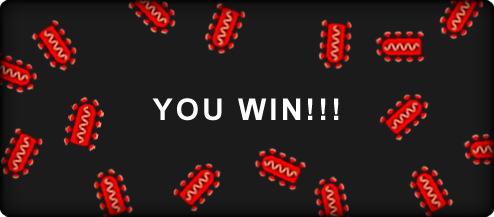
<style>
.page{position:relative;width:494px;height:217px;background:#1b1b1b}
.page>*{position:absolute;margin:0}
.t1{font:30px "Arial-BoldMT";letter-spacing:0.1em;color:#ffffff}
</style>
<div class="page">
<p class="t1" style="left:152px;top:98px;width:187px;height:23px">YOU WIN!!!</p>
</div>
